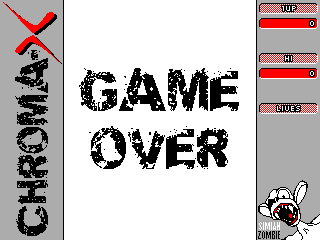
<style>
.page{position:relative;width:320px;height:240px;background:#ffffff}
.page>*{position:absolute;margin:0}
.t1{font:36px "SoulMission";color:#000000}
.t2{font:48px "SoulMission";color:#000000}
.t3{font:10px "AgencyFB-Reg";color:#ffffff}
.t4{font:10px "AgencyFB-Reg";color:#000000}
</style>
<div class="page">
<p class="t1" style="left:15px;top:58px;width:33px;height:178px;rotate:-90deg">CHROMA</p>
<p class="t2" style="left:79px;top:68px;width:160px;height:101px;text-align:center">GAME<br>OVER</p>
<p class="t3" style="left:259px;top:222px;width:21px;height:8px">SIMIAN</p>
<p class="t4" style="left:258px;top:231px;width:22px;height:8px">ZOMBIE</p>
</div>
